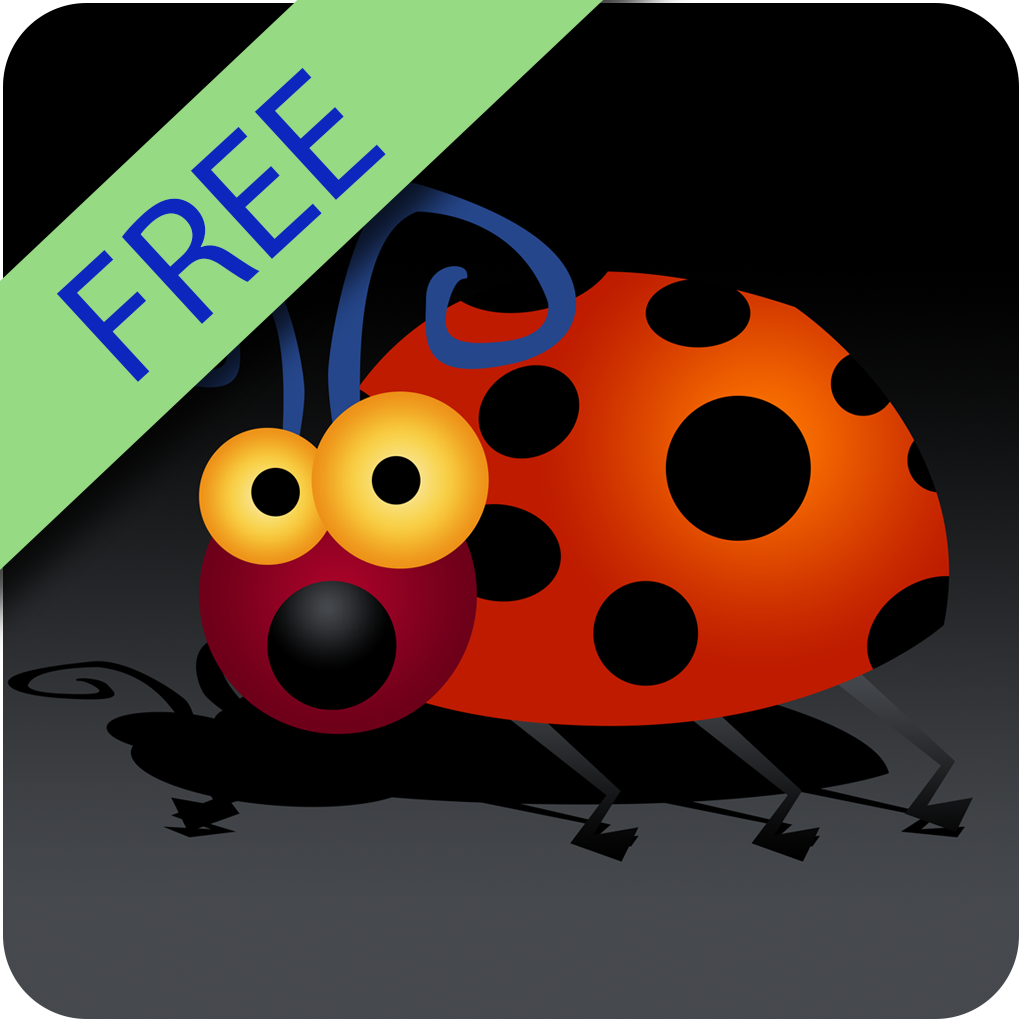
<style>
.page{position:relative;width:1024px;height:1024px;background:#000000}
.page>*{position:absolute;margin:0}
.t1{font:177.7px "MyriadPro-Regular";color:#0d26bd}
</style>
<div class="page">
<p class="t1" style="left:56px;top:67px;width:330px;height:315px;rotate:-43deg">FREE</p>
</div>
